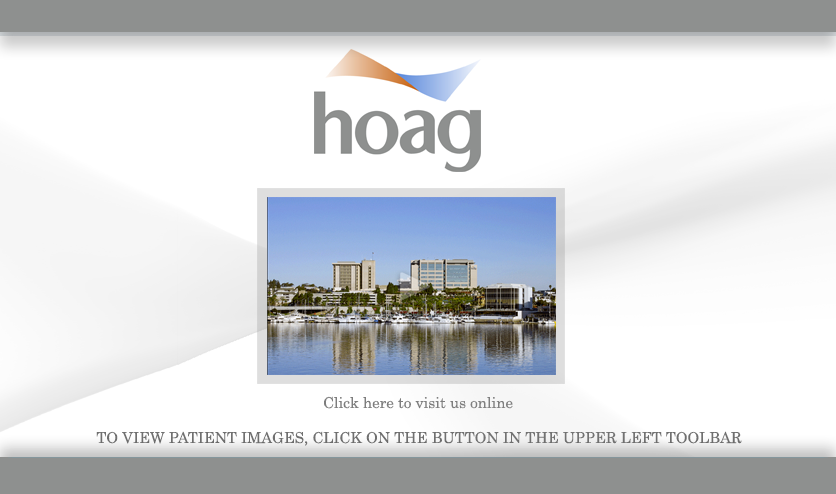
<style>
.page{position:relative;width:836px;height:494px;background:#ffffff}
.page>*{position:absolute;margin:0}
.t1{font:15px "Century";color:#7d7d7d}
.t2{font:15px "Century";color:#707070}
</style>
<div class="page">
<p class="t1" style="left:324px;top:396px;width:189px;height:13px">Click here to visit us online</p>
<p class="t2" style="left:96px;top:431px;width:646px;height:15px">TO VIEW PATIENT IMAGES, CLICK ON THE BUTTON IN THE UPPER LEFT TOOLBAR</p>
</div>
